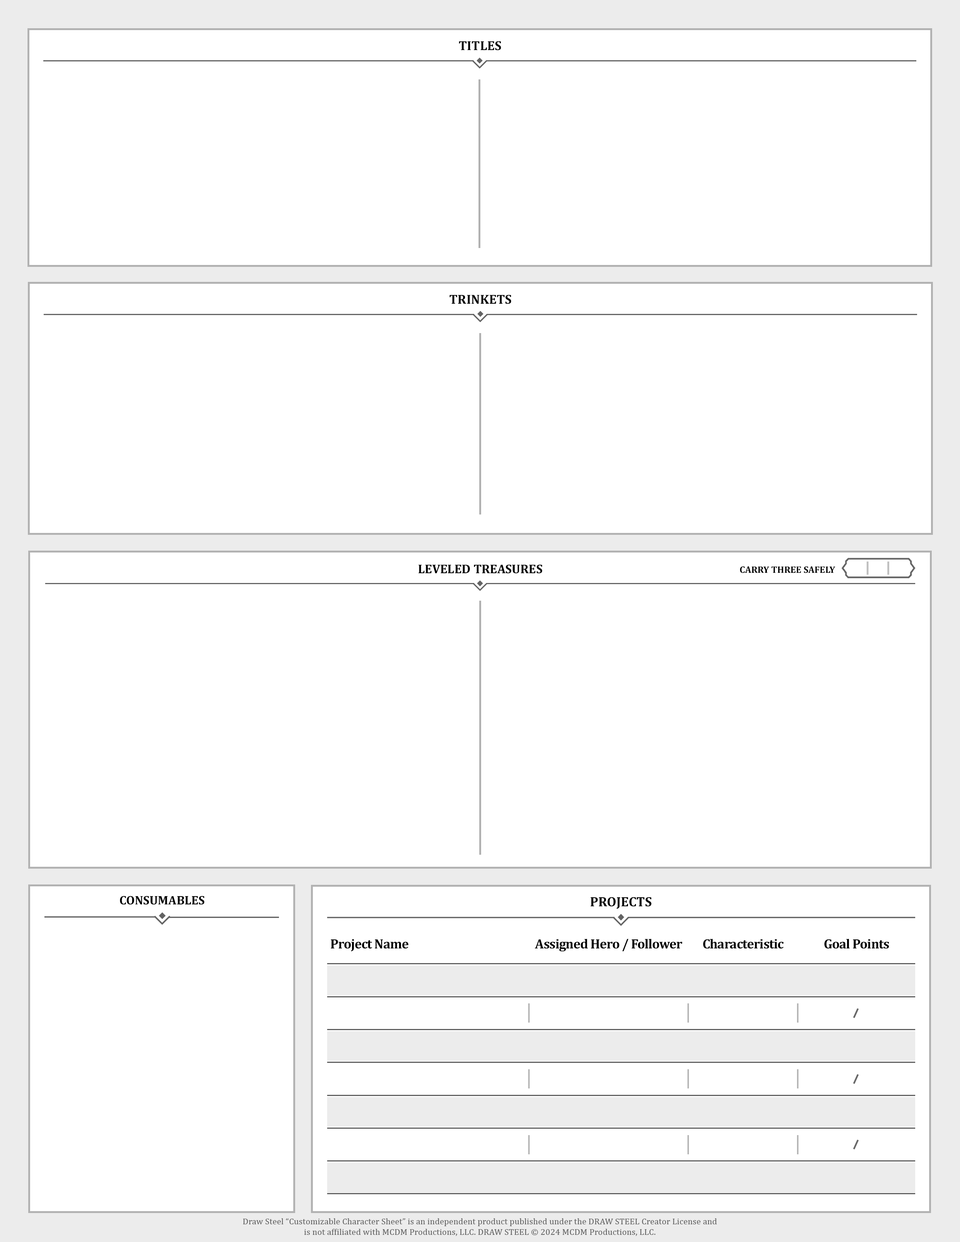
<style>
.page{position:relative;width:960px;height:1242px;background:#ffffff}
.page>*{position:absolute;margin:0}
.t1{font:13.2px "Cambria-Bold";color:#000000}
.t2{font:12.7px "Cambria-Bold";color:#000000}
.t3{font:9.5px "Cambria-Bold";color:#000000}
.t4{font:12.4px "Cambria-Bold";color:#000000}
.t5{font:13.5px "Cambria-Bold";color:#000000}
.t6{font:13.5px "Cambria-Bold";letter-spacing:-0.03em;color:#000000}
</style>
<div class="page">
<p class="t1" style="left:459px;top:41px;width:42px;height:9px">TITLES</p>
<p class="t1" style="left:449px;top:295px;width:62px;height:9px">TRINKETS</p>
<p class="t2" style="left:418px;top:565px;width:124px;height:9px">LEVELED TREASURES</p>
<p class="t3" style="left:740px;top:567px;width:95px;height:6px">CARRY THREE SAFELY</p>
<p class="t4" style="left:120px;top:896px;width:84px;height:9px">CONSUMABLES</p>
<p class="t5" style="left:590px;top:897px;width:62px;height:12px">PROJECTS</p>
<p class="t6" style="left:331px;top:939px;width:77px;height:13px">Project Name</p>
<p class="t6" style="left:535px;top:939px;width:147px;height:13px">Assigned Hero / Follower</p>
<p class="t6" style="left:703px;top:939px;width:81px;height:10px">Characteristic</p>
<p class="t6" style="left:824px;top:939px;width:65px;height:10px">Goal Points</p>
</div>
